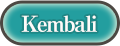
<style>
.page{position:relative;width:120px;height:46px}
.page>*{position:absolute;margin:0}
.t1{font:22px "RyuminPro-ExBold";letter-spacing:-0.08em;color:#fdfbf9}
</style>
<div class="page">
<p class="t1" style="left:21px;top:15px;width:76px;height:17px">Kembali</p>
</div>
